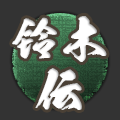
<style>
.page{position:relative;width:120px;height:120px;background:#333333}
.page>*{position:absolute;margin:0}
.t1{font:48px/50px "KokuryuTtf";letter-spacing:0.1em;color:#ffffff;font-weight:bold}
.t2{font:48px/50px "GEETYPE-BailongGBT-Flash";letter-spacing:0.1em;color:#ffffff;font-weight:bold}
</style>
<div class="page">
<p class="t1" style="left:12px;top:16px;width:95px;height:94px;text-align:center"><span class="t2">铃</span>木<br>伝</p>
</div>
